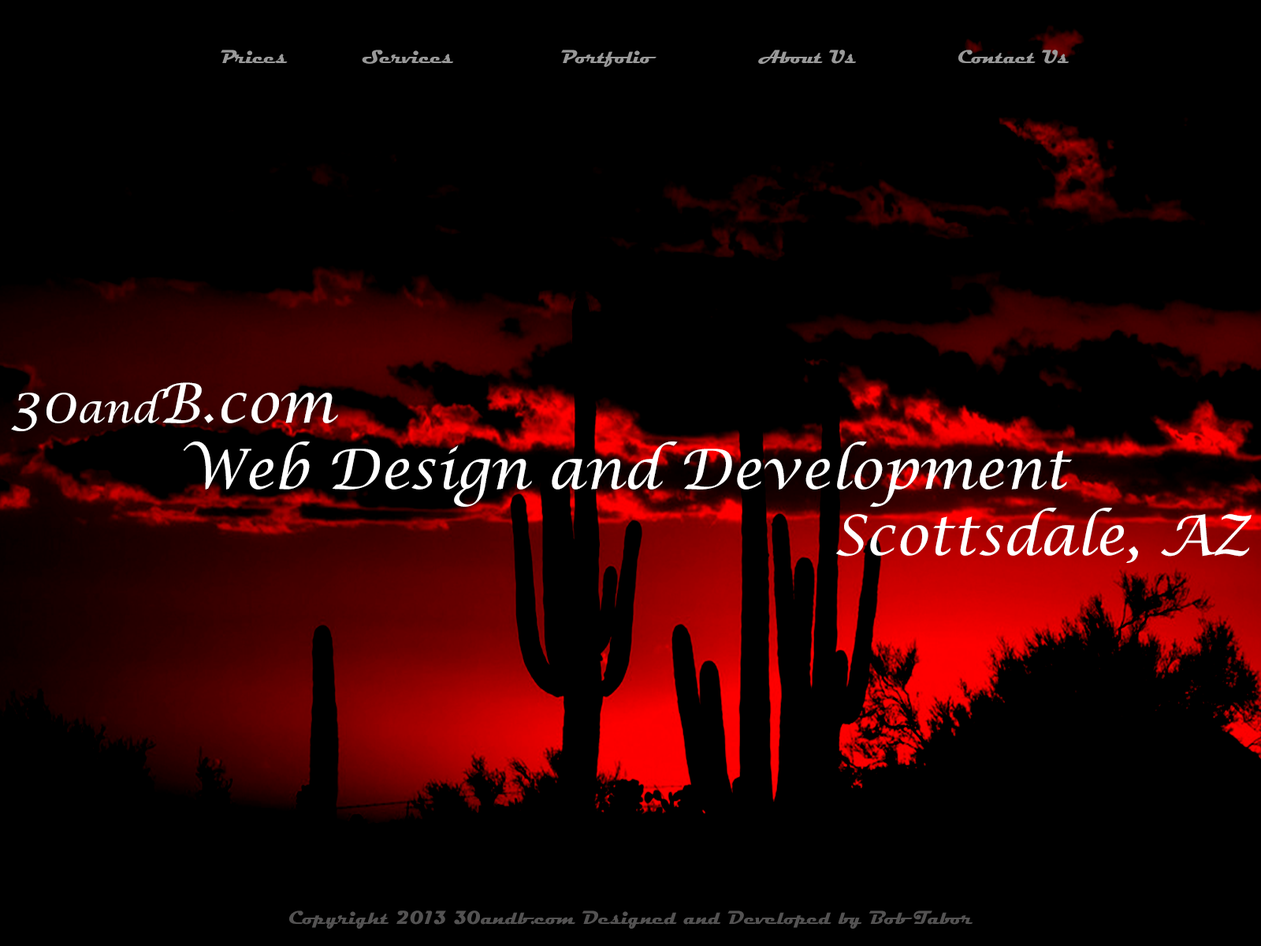
<style>
.page{position:relative;width:1261px;height:946px;background:#000000}
.page>*{position:absolute;margin:0}
.t1{font:18.9px "Magneto-Bold";color:#999999}
.t2{font:55.2px "LucidaCalligraphy-Italic";color:#ffffff}
.t3{font:39.4px "LucidaCalligraphy-Italic";color:#ffffff}
.t4{font:18.9px "Magneto-Bold";color:#535252}
</style>
<div class="page">
<p class="t1" style="left:221px;top:50px;width:848px;height:17px">Prices   Services    Portfolio    About Us    Contact Us</p>
<p class="t2" style="left:11px;top:382px;width:1240px;height:181px">30<span class="t3">and</span>B.com<br>      Web Design and Development      <br>                             Scottsdale, AZ</p>
<p class="t4" style="left:289px;top:910px;width:683px;height:18px">Copyright 2013 30andb.com Designed and Developed by Bob Tabor</p>
</div>
